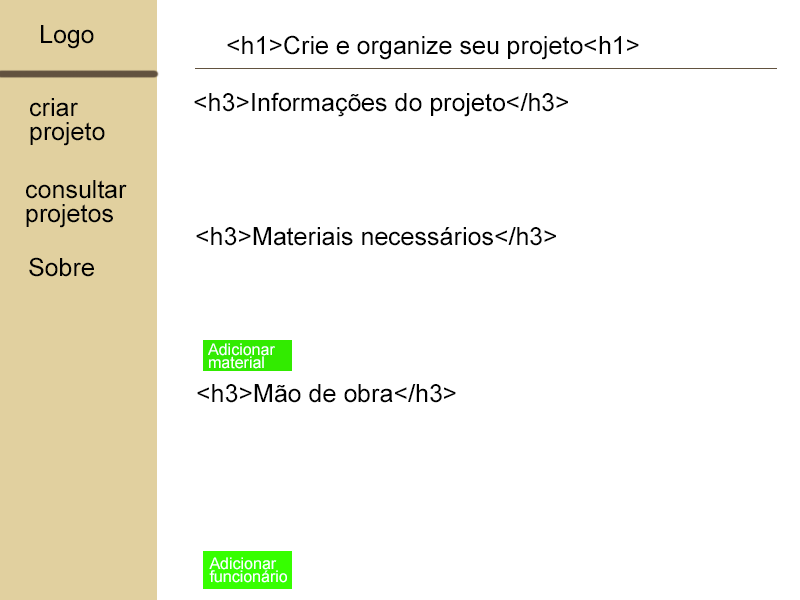
<style>
.page{position:relative;width:800px;height:600px;background:#ffffff}
.page>*{position:absolute;margin:0}
.t1{font:25px "ArialMT";color:#000000}
.t2{font:25px/24.2px "ArialMT";color:#000000}
.t3{font:16px/13.2px "ArialMT";color:#ffffff}
</style>
<div class="page">
<p class="t1" style="left:41px;top:25px;width:53px;height:24px">Logo</p>
<p class="t1" style="left:227px;top:35px;width:412px;height:25px">&lt;h1&gt;Crie e organize seu projeto&lt;h1&gt;</p>
<p class="t2" style="left:30px;top:98px;width:75px;height:48px">criar<br>projeto</p>
<p class="t1" style="left:194px;top:92px;width:374px;height:25px">&lt;h3&gt;Informações do projeto&lt;/h3&gt;</p>
<p class="t2" style="left:26px;top:180px;width:101px;height:48px">consultar<br>projetos</p>
<p class="t1" style="left:196px;top:227px;width:360px;height:19px">&lt;h3&gt;Materiais necessários&lt;/h3&gt;</p>
<p class="t1" style="left:29px;top:257px;width:65px;height:20px">Sobre</p>
<p class="t3" style="left:208px;top:343px;width:67px;height:26px">Adicionar<br>material</p>
<p class="t1" style="left:197px;top:384px;width:259px;height:19px">&lt;h3&gt;Mão de obra&lt;/h3&gt;</p>
<p class="t3" style="left:209px;top:557px;width:78px;height:26px">Adicionar<br>funcionário</p>
</div>
